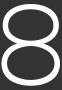
<style>
.page{position:relative;width:62px;height:90px;background:#333333}
.page>*{position:absolute;margin:0}
.t1{font:111.8px "NexaLight";color:#ffffff;scale:0.91 1}
</style>
<div class="page">
<p class="t1" style="left:1px;top:4px;width:59px;height:82px">8</p>
</div>
